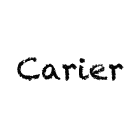
<style>
.page{position:relative;width:140px;height:140px;background:#ffffff}
.page>*{position:absolute;margin:0}
.t1{font:30px "Chalkduster";color:#050505}
</style>
<div class="page">
<p class="t1" style="left:17px;top:57px;width:107px;height:24px">Carier</p>
</div>
